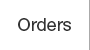
<style>
.page{position:relative;width:90px;height:50px;background:#ffffff}
.page>*{position:absolute;margin:0}
.t1{font:18px "HelveticaNeueLTStd-Roman";color:#333333}
</style>
<div class="page">
<p class="t1" style="left:18px;top:18px;width:53px;height:13px">Orders</p>
</div>
